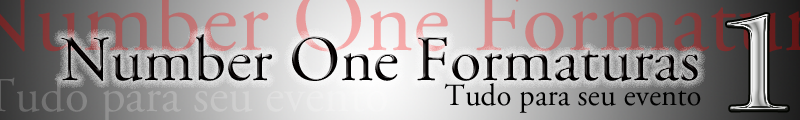
<style>
.page{position:relative;width:800px;height:120px}
.page>*{position:absolute;margin:0}
.t1{font:150.1px "AGaramondPro-Regular";scale:1.53 1}
.t2{font:64.3px "AGaramondPro-Regular";color:#040000}
.t3{font:30.8px "AGaramondPro-Regular";color:#000000}
</style>
<div class="page">
<p class="t1" style="left:727px;top:14px;width:61px;height:97px">1</p>
<p class="t2" style="left:61px;top:34px;width:637px;height:48px">Number One Formaturas</p>
<p class="t3" style="left:444px;top:83px;width:257px;height:30px">Tudo para seu evento</p>
</div>
